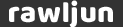
<style>
.page{position:relative;width:123px;height:27px;background:#333333}
.page>*{position:absolute;margin:0}
.t1{font:30px "Baloo-Regular";letter-spacing:0.02em;color:#ffffff}
</style>
<div class="page">
<p class="t1" style="left:9px;top:0px;width:104px;height:28px">rawljun</p>
</div>
